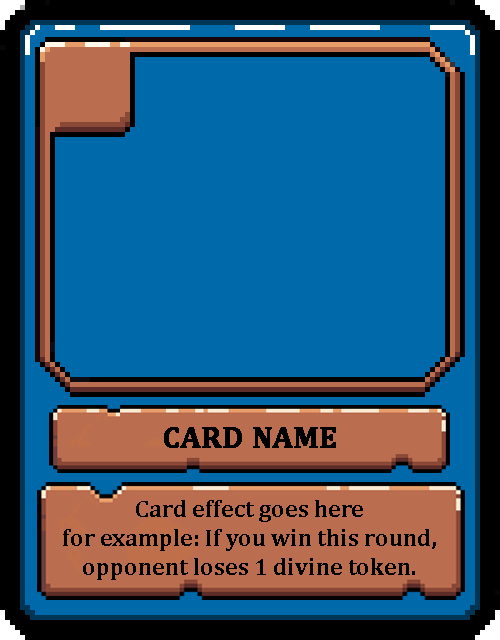
<style>
.page{position:relative;width:500px;height:640px;background:#0069aa}
.page>*{position:absolute;margin:0}
.t1{font:30px "Cambria-Bold";color:#000000;text-transform:uppercase;font-weight:bold}
.t2{font:24px "Cambria-Bold";color:#000000}
.t3{font:24px/12.9px "Cambria-Bold";color:#000000}
</style>
<div class="page">
<p class="t1" style="left:164px;top:427px;width:172px;height:21px">Card Name</p>
<p class="t2" style="left:63px;top:500px;width:373px;height:80px;text-align:center"><span class="t3">Card effect goes here</span><br>for example: If you win this round, opponent loses 1 divine token.</p>
</div>
